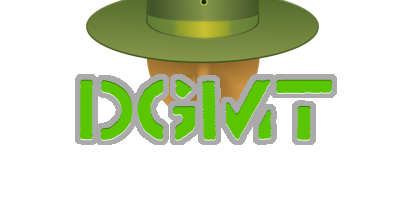
<style>
.page{position:relative;width:400px;height:200px;background:#ffffff}
.page>*{position:absolute;margin:0}
.t1{font:75px "Crass";color:#59c600}
</style>
<div class="page">
<p class="t1" style="left:80px;top:79px;width:252px;height:61px">DGMT</p>
</div>
